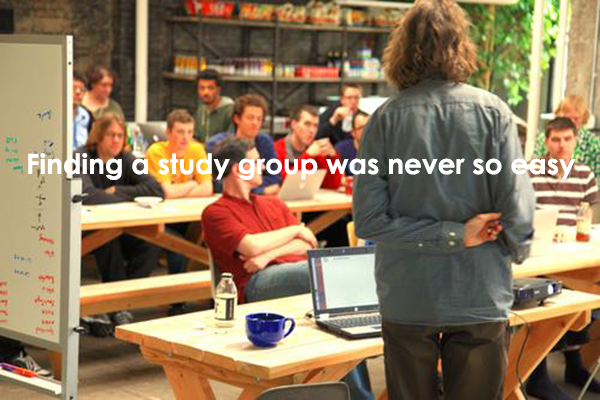
<style>
.page{position:relative;width:600px;height:400px}
.page>*{position:absolute;margin:0}
.t1{font:28px "CenturyGothic-Bold";color:#ffffff}
</style>
<div class="page">
<p class="t1" style="left:28px;top:153px;width:548px;height:27px">Finding a study group was never so easy</p>
</div>
